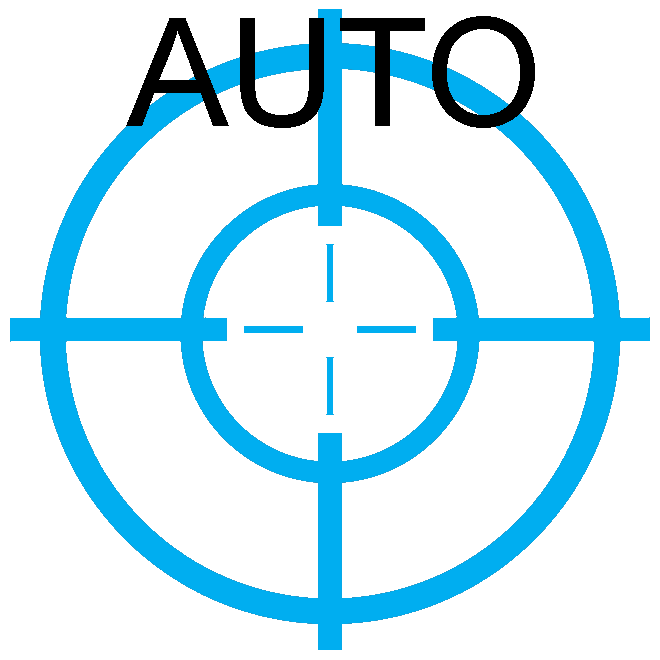
<style>
.page{position:relative;width:660px;height:660px;background:#ffffff}
.page>*{position:absolute;margin:0}
.t1{font:150px "ArialMT";color:#000000}
</style>
<div class="page">
<p class="t1" style="left:126px;top:16px;width:409px;height:112px">AUTO</p>
</div>
